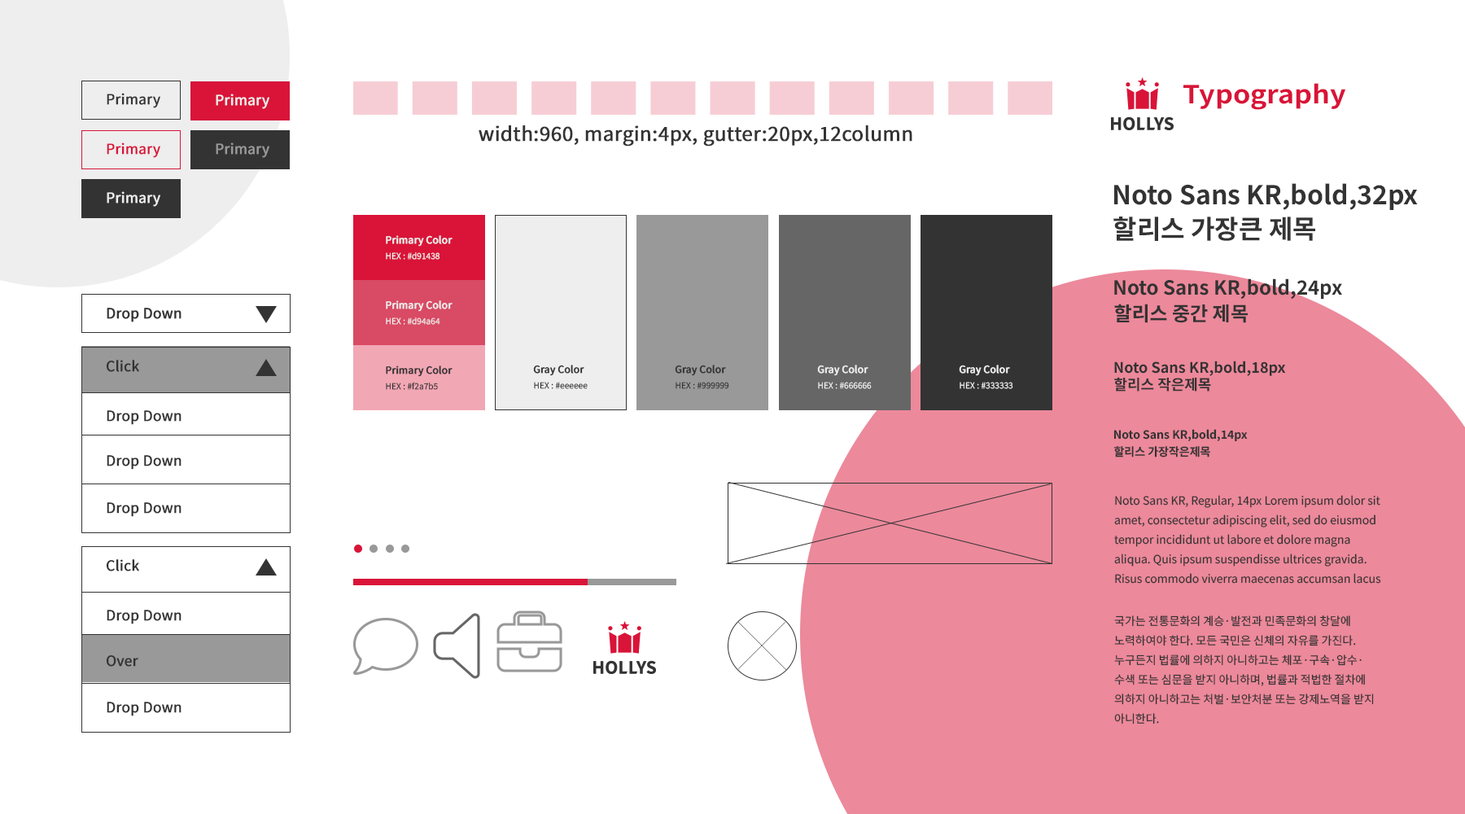
<style>
.page{position:relative;width:1465px;height:814px;background:#ffffff}
.page>*{position:absolute;margin:0}
.t1{font:25px "NotoSansKR-Bold";color:#d91438;scale:1.11 1}
.t2{font:14px "NotoSansKR-Regular";color:#333333;font-weight:bold}
.t3{font:14px "NotoSansKR-Regular";color:#eeeeee;font-weight:bold}
.t4{font:19.5px "NotoSansKR-Regular";color:#333333;font-weight:bold}
.t5{font:14px "NotoSansKR-Regular";color:#d91438;font-weight:bold}
.t6{font:14px "NotoSansKR-Regular";color:#999999;font-weight:bold}
.t7{font:26px "NotoSansKR-Bold";color:#333333}
.t8{font:9.8px "NotoSansKR-Regular";color:#eeeeee;font-weight:bold}
.t9{font:8.1px "NotoSansKR-Light";color:#eeeeee;font-weight:bold}
.t10{font:19.5px "NotoSansKR-Bold";color:#333333}
.t11{font:14.1px "NotoSansKR-Regular";color:#333333;font-weight:bold}
.t12{font:9.8px "NotoSansKR-Regular";color:#333333;font-weight:bold}
.t13{font:14.7px "NotoSansKR-Bold";color:#333333}
.t14{font:8.1px "NotoSansKR-Light";color:#333333;font-weight:bold}
.t15{font:11.4px "NotoSansKR-Bold";color:#333333}
.t16{font:11.4px/19.5px "NotoSansKR-Regular";color:#333333}
</style>
<div class="page">
<p class="t1" style="left:1183px;top:83px;width:163px;height:27px">Typography</p>
<p class="t2" style="left:107px;top:93px;width:53px;height:15px">Primary</p>
<p class="t3" style="left:216px;top:94px;width:53px;height:15px">Primary</p>
<p class="t4" style="left:479px;top:125px;width:433px;height:22px">width:960, margin:4px, gutter:20px,12column</p>
<p class="t5" style="left:107px;top:142px;width:53px;height:16px">Primary</p>
<p class="t6" style="left:216px;top:142px;width:53px;height:16px">Primary</p>
<p class="t7" style="left:1114px;top:183px;width:304px;height:27px">Noto Sans KR,bold,32px</p>
<p class="t3" style="left:107px;top:191px;width:53px;height:16px">Primary</p>
<p class="t7" style="left:1113px;top:217px;width:202px;height:24px">할리스 가장큰 제목</p>
<p class="t8" style="left:386px;top:235px;width:67px;height:12px">Primary Color</p>
<p class="t9" style="left:386px;top:252px;width:54px;height:8px">HEX : #d91438</p>
<p class="t10" style="left:1114px;top:278px;width:228px;height:22px">Noto Sans KR,bold,24px</p>
<p class="t8" style="left:386px;top:300px;width:67px;height:12px">Primary Color</p>
<p class="t10" style="left:1114px;top:304px;width:134px;height:19px">할리스 중간 제목</p>
<p class="t11" style="left:107px;top:308px;width:75px;height:14px">Drop Down</p>
<p class="t9" style="left:386px;top:317px;width:54px;height:8px">HEX : #d94a64</p>
<p class="t11" style="left:106px;top:360px;width:33px;height:12px">Click</p>
<p class="t12" style="left:386px;top:365px;width:67px;height:12px">Primary Color</p>
<p class="t12" style="left:533px;top:365px;width:51px;height:11px">Gray Color</p>
<p class="t12" style="left:675px;top:365px;width:51px;height:11px">Gray Color</p>
<p class="t8" style="left:817px;top:365px;width:51px;height:11px">Gray Color</p>
<p class="t8" style="left:959px;top:365px;width:51px;height:11px">Gray Color</p>
<p class="t13" style="left:1114px;top:361px;width:172px;height:15px">Noto Sans KR,bold,18px</p>
<p class="t13" style="left:1114px;top:377px;width:97px;height:14px">할리스 작은제목</p>
<p class="t14" style="left:386px;top:382px;width:52px;height:8px">HEX : #f2a7b5</p>
<p class="t14" style="left:534px;top:382px;width:54px;height:7px">HEX : #eeeeee</p>
<p class="t14" style="left:676px;top:382px;width:53px;height:7px">HEX : #999999</p>
<p class="t9" style="left:818px;top:382px;width:54px;height:7px">HEX : #666666</p>
<p class="t9" style="left:960px;top:382px;width:53px;height:7px">HEX : #333333</p>
<p class="t11" style="left:107px;top:410px;width:75px;height:15px">Drop Down</p>
<p class="t15" style="left:1113px;top:429px;width:135px;height:13px">Noto Sans KR,bold,14px</p>
<p class="t15" style="left:1114px;top:446px;width:96px;height:11px">할리스 가장작은제목</p>
<p class="t11" style="left:107px;top:455px;width:75px;height:15px">Drop Down</p>
<p class="t16" style="left:1114px;top:495px;width:267px;height:89px">Noto Sans KR, Regular, 14px Lorem ipsum dolor sit amet, consectetur adipiscing elit, sed do eiusmod tempor incididunt ut labore et dolore magna aliqua. Quis ipsum suspendisse ultrices gravida. Risus commodo viverra maecenas accumsan lacus vel facilisis.</p>
<p class="t11" style="left:107px;top:502px;width:75px;height:15px">Drop Down</p>
<p class="t11" style="left:106px;top:559px;width:33px;height:12px">Click</p>
<p class="t11" style="left:107px;top:610px;width:75px;height:14px">Drop Down</p>
<p class="t16" style="left:1114px;top:615px;width:260px;height:109px">국가는 전통문화의 계승·발전과 민족문화의 창달에 노력하여야 한다. 모든 국민은 신체의 자유를 가진다. 누구든지 법률에 의하지 아니하고는 체포·구속·압수·수색 또는 심문을 받지 아니하며, 법률과 적법한 절차에 의하지 아니하고는 처벌·보안처분 또는 강제노역을 받지 아니한다.</p>
<p class="t11" style="left:106px;top:654px;width:32px;height:13px">Over</p>
<p class="t11" style="left:107px;top:702px;width:75px;height:14px">Drop Down</p>
</div>
